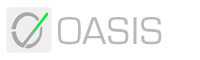
<style>
.page{position:relative;width:200px;height:60px;background:#ffffff}
.page>*{position:absolute;margin:0}
.t1{font:40px "EurostileRegular";letter-spacing:0.02em;color:#bab9b9;text-transform:uppercase}
</style>
<div class="page">
<p class="t1" style="left:58px;top:17px;width:104px;height:28px">OASIS</p>
</div>
